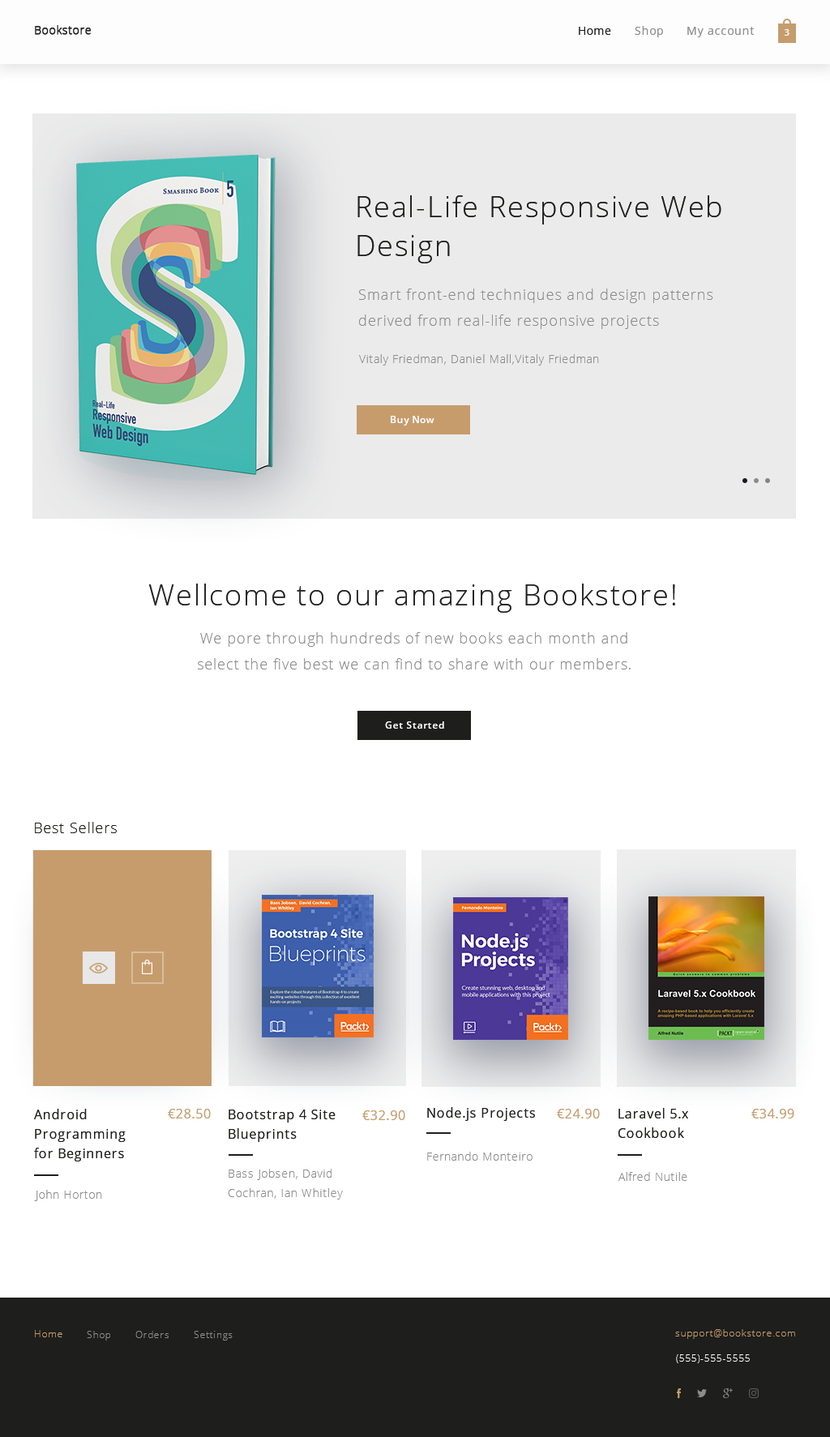
<style>
.page{position:relative;width:830px;height:1437px;background:#ffffff}
.page>*{position:absolute;margin:0}
.t1{font:29.2px/38.9px "OpenSans-Light";letter-spacing:0.05em;color:#1e1e1c}
.t2{font:14.6px/25.9px "OpenSans-Light";letter-spacing:0.05em;color:#8c8c8c}
.t3{font:11.3px "OpenSans-Light";letter-spacing:0.05em;color:#8c8c8c}
.t4{font:9.7px "OpenSans-Semibold";letter-spacing:0.05em;color:#fffefe}
.t5{font:29.2px "OpenSans-Light";letter-spacing:0.05em;color:#212121}
.t6{font:14.6px "OpenSans-Light";letter-spacing:0.05em;color:#1e1e1c}
.t7{font:13px/19.5px "OpenSans";letter-spacing:0.05em;color:#1e1e1c}
.t8{font:13px "OpenSans";letter-spacing:0.05em;color:#c69c6d}
.t9{font:13px "OpenSans";letter-spacing:0.05em;color:#1e1e1c}
.t10{font:11.3px/19.5px "OpenSans-Light";letter-spacing:0.05em;color:#8c8c8c}
</style>
<div class="page">
<p class="t1" style="left:357px;top:195px;width:364px;height:68px">Real-Life Responsive Web Design</p>
<p class="t2" style="left:359px;top:289px;width:354px;height:40px">Smart front-end techniques and design patterns derived from real-life responsive projects</p>
<p class="t3" style="left:359px;top:354px;width:240px;height:12px">Vitaly Friedman, Daniel Mall,Vitaly Friedman</p>
<p class="t4" style="left:391px;top:416px;width:43px;height:9px">Buy Now</p>
<p class="t5" style="left:149px;top:584px;width:526px;height:29px">Wellcome to our amazing Bookstore!</p>
<p class="t2" style="left:198px;top:632px;width:433px;height:37px;text-align:center">We pore through hundreds of new books each month and select the five best we can find to share with our members.</p>
<p class="t4" style="left:385px;top:721px;width:59px;height:8px">Get Started</p>
<p class="t6" style="left:35px;top:822px;width:82px;height:11px">Best Sellers</p>
<p class="t7" style="left:34px;top:1109px;width:92px;height:52px">Android<br>Programming for Beginners</p>
<p class="t8" style="left:168px;top:1109px;width:43px;height:9px">€28.50</p>
<p class="t7" style="left:229px;top:1109px;width:107px;height:33px">Bootstrap 4 Site Blueprints</p>
<p class="t9" style="left:427px;top:1107px;width:108px;height:14px">Node.js Projects</p>
<p class="t8" style="left:557px;top:1109px;width:43px;height:9px">€24.90</p>
<p class="t7" style="left:618px;top:1108px;width:70px;height:30px">Laravel 5.x Cookbook</p>
<p class="t8" style="left:751px;top:1109px;width:43px;height:9px">€34.99</p>
<p class="t8" style="left:362px;top:1110px;width:43px;height:10px">€32.90</p>
<p class="t3" style="left:427px;top:1152px;width:105px;height:9px">Fernando Monteiro</p>
<p class="t10" style="left:228px;top:1169px;width:115px;height:30px">Bass Jobsen, David <br>Cochran, Ian Whitley</p>
<p class="t3" style="left:618px;top:1172px;width:69px;height:9px">Alfred Nutile</p>
<p class="t3" style="left:34px;top:1190px;width:68px;height:11px">John Horton</p>
</div>
